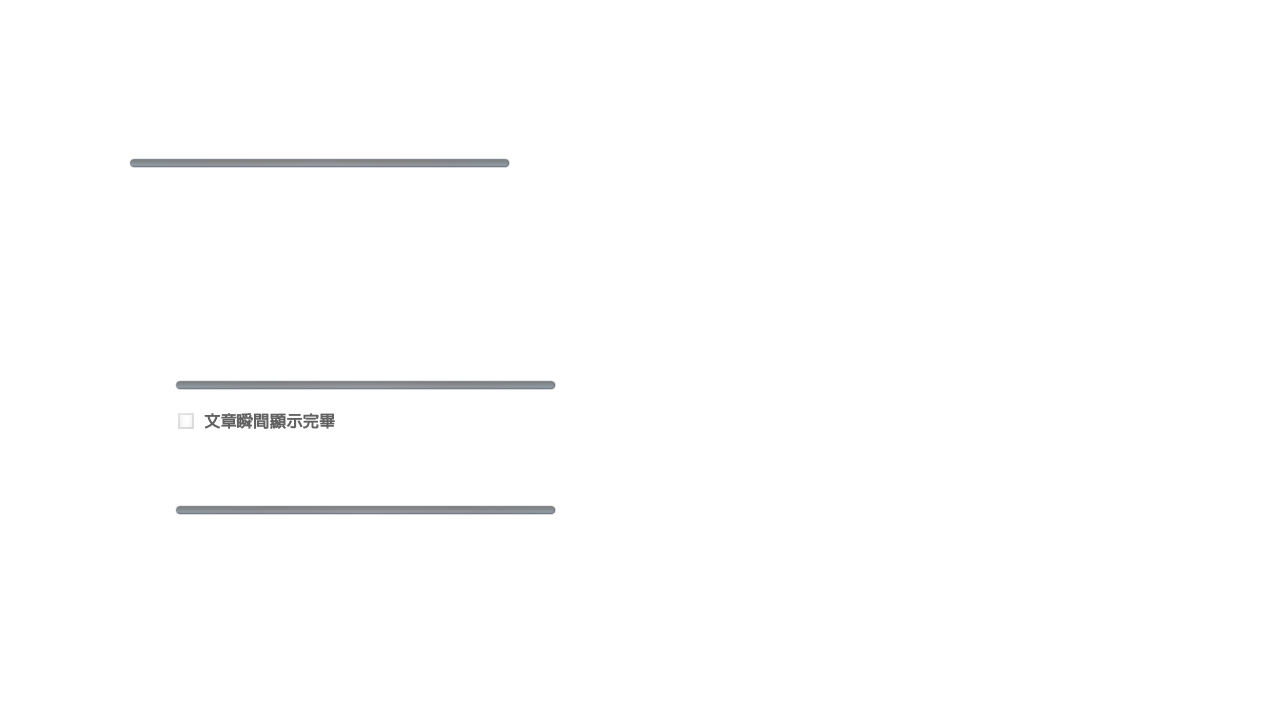
<style>
.page{position:relative;width:1280px;height:720px;background:#ffffff}
.page>*{position:absolute;margin:0}
.t1{font:16px "AdobeFanHeitiStd-Bold";color:#626262;font-weight:bold}
</style>
<div class="page">
<p class="t1" style="left:204px;top:413px;width:131px;height:16px">文章瞬間顯示完畢</p>
</div>
